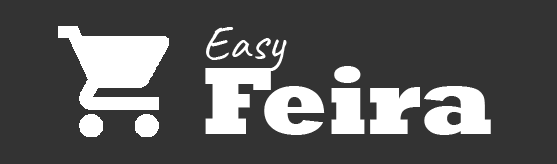
<style>
.page{position:relative;width:557px;height:164px;background:#333333}
.page>*{position:absolute;margin:0}
.t1{font:49.2px "Caveat-Regular";color:#ffffff}
.t2{font:97.7px "Rockwell-ExtraBold";color:#ffffff}
</style>
<div class="page">
<p class="t1" style="left:206px;top:27px;width:81px;height:44px">Easy</p>
<p class="t2" style="left:205px;top:66px;width:286px;height:69px">Feira</p>
</div>
